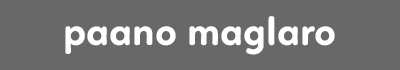
<style>
.page{position:relative;width:400px;height:70px;background:#686868}
.page>*{position:absolute;margin:0}
.t1{font:40px "Linotte-Bold";color:#ffffff}
</style>
<div class="page">
<p class="t1" style="left:65px;top:16px;width:270px;height:39px">paano maglaro</p>
</div>
